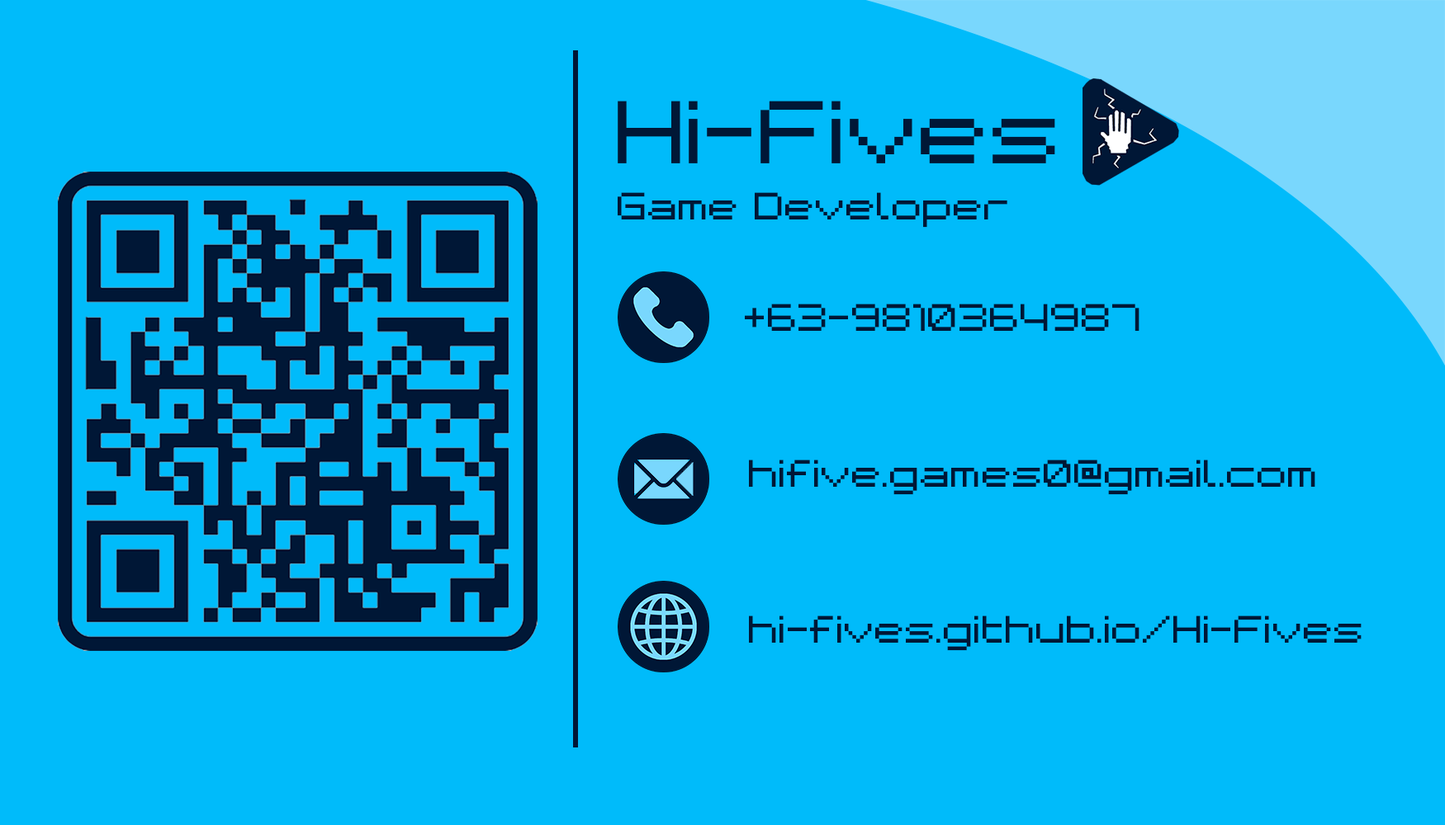
<style>
.page{position:relative;width:1445px;height:825px;background:#00bbfa}
.page>*{position:absolute;margin:0}
.t1{font:80.3px "BMspaceA9";color:#001736}
.t2{font:34.4px "BMspaceA9";color:#001736}
</style>
<div class="page">
<p class="t1" style="left:617px;top:101px;width:438px;height:62px">Hi-Fives</p>
<p class="t2" style="left:617px;top:192px;width:390px;height:36px">Game Developer</p>
<p class="t2" style="left:745px;top:304px;width:394px;height:27px">+63-9810364987</p>
<p class="t2" style="left:749px;top:460px;width:566px;height:35px">hifive.games0@gmail.com</p>
<p class="t2" style="left:749px;top:616px;width:612px;height:35px">hi-fives.github.io/Hi-Fives</p>
</div>
